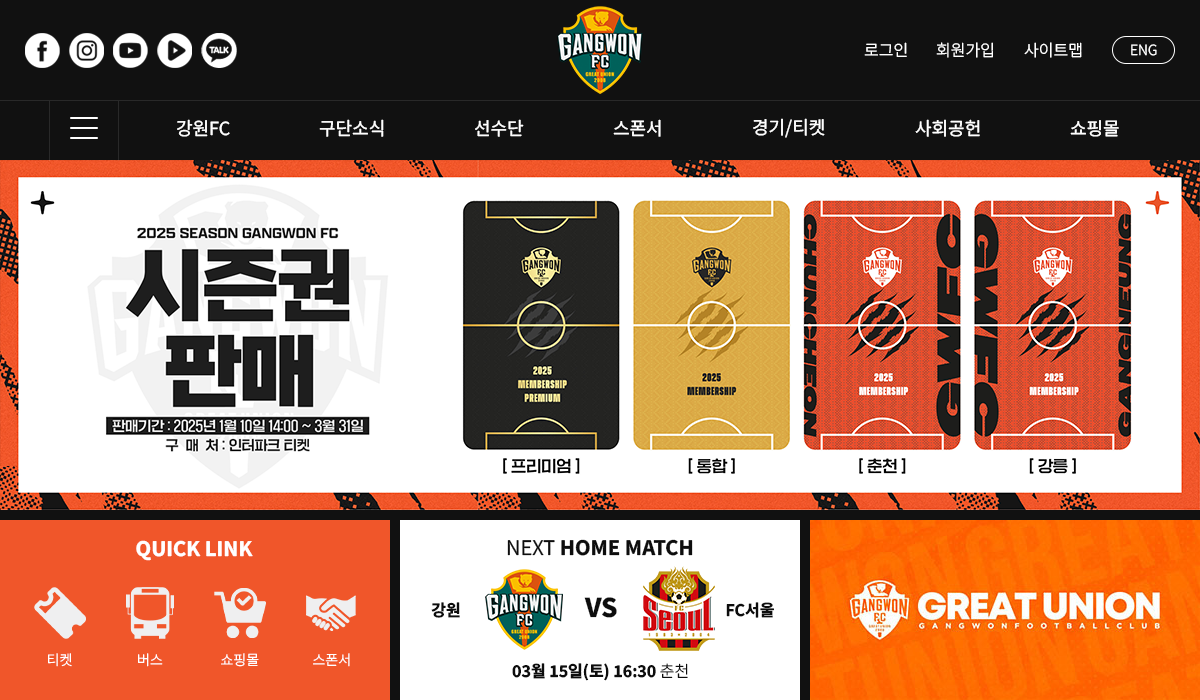
<style>
.page{position:relative;width:1200px;height:700px;background:#ffffff}
.page>*{position:absolute;margin:0}
.t1{font:16px "NotoSansKR-Light";color:#ffffff}
.t2{font:14px "NotoSansKR-Light";color:#ffffff}
.t3{font:18px "NotoSansKR-Regular";color:#ffffff}
.t4{font:20px "NotoSansKR-ExtraBold";color:#ffffff}
.t5{font:20px "NotoSansKR-ExtraBold";color:#0d0d0d}
.t6{font:20px "NotoSansKR-Regular";color:#0d0d0d}
.t7{font:16px "NotoSansKR-Bold";color:#0d0d0d}
.t8{font:25.8px "NotoSansKR-Black";color:#0d0d0d}
.t9{font:16px "NotoSansKR-Light";color:#0d0d0d}
</style>
<div class="page">
<p class="t1" style="left:864px;top:42px;width:43px;height:15px">로그인</p>
<p class="t1" style="left:936px;top:42px;width:57px;height:16px">회원가입</p>
<p class="t1" style="left:1024px;top:42px;width:58px;height:16px">사이트맵</p>
<p class="t2" style="left:1131px;top:44px;width:26px;height:12px">ENG</p>
<p class="t3" style="left:177px;top:119px;width:53px;height:18px">강원FC</p>
<p class="t3" style="left:319px;top:119px;width:65px;height:18px">구단소식</p>
<p class="t3" style="left:475px;top:119px;width:49px;height:18px">선수단</p>
<p class="t3" style="left:613px;top:119px;width:48px;height:18px">스폰서</p>
<p class="t3" style="left:753px;top:118px;width:72px;height:20px">경기/티켓</p>
<p class="t3" style="left:915px;top:119px;width:65px;height:18px">사회공헌</p>
<p class="t3" style="left:1070px;top:120px;width:49px;height:17px">쇼핑몰</p>
<p class="t4" style="left:136px;top:540px;width:117px;height:21px">QUICK LINK</p>
<p class="t5" style="left:507px;top:539px;width:186px;height:17px"><span class="t6">NEXT </span>HOME MATCH</p>
<p class="t7" style="left:431px;top:602px;width:29px;height:16px">강원</p>
<p class="t8" style="left:584px;top:597px;width:33px;height:21px">VS</p>
<p class="t7" style="left:726px;top:602px;width:48px;height:16px">FC서울</p>
<p class="t2" style="left:48px;top:653px;width:24px;height:14px">티켓</p>
<p class="t2" style="left:138px;top:653px;width:25px;height:14px">버스</p>
<p class="t2" style="left:221px;top:653px;width:38px;height:14px">쇼핑몰</p>
<p class="t2" style="left:313px;top:653px;width:37px;height:14px">스폰서</p>
<p class="t7" style="left:512px;top:663px;width:176px;height:18px">03월 15일(토) 16:30 <span class="t9">춘천</span></p>
</div>
